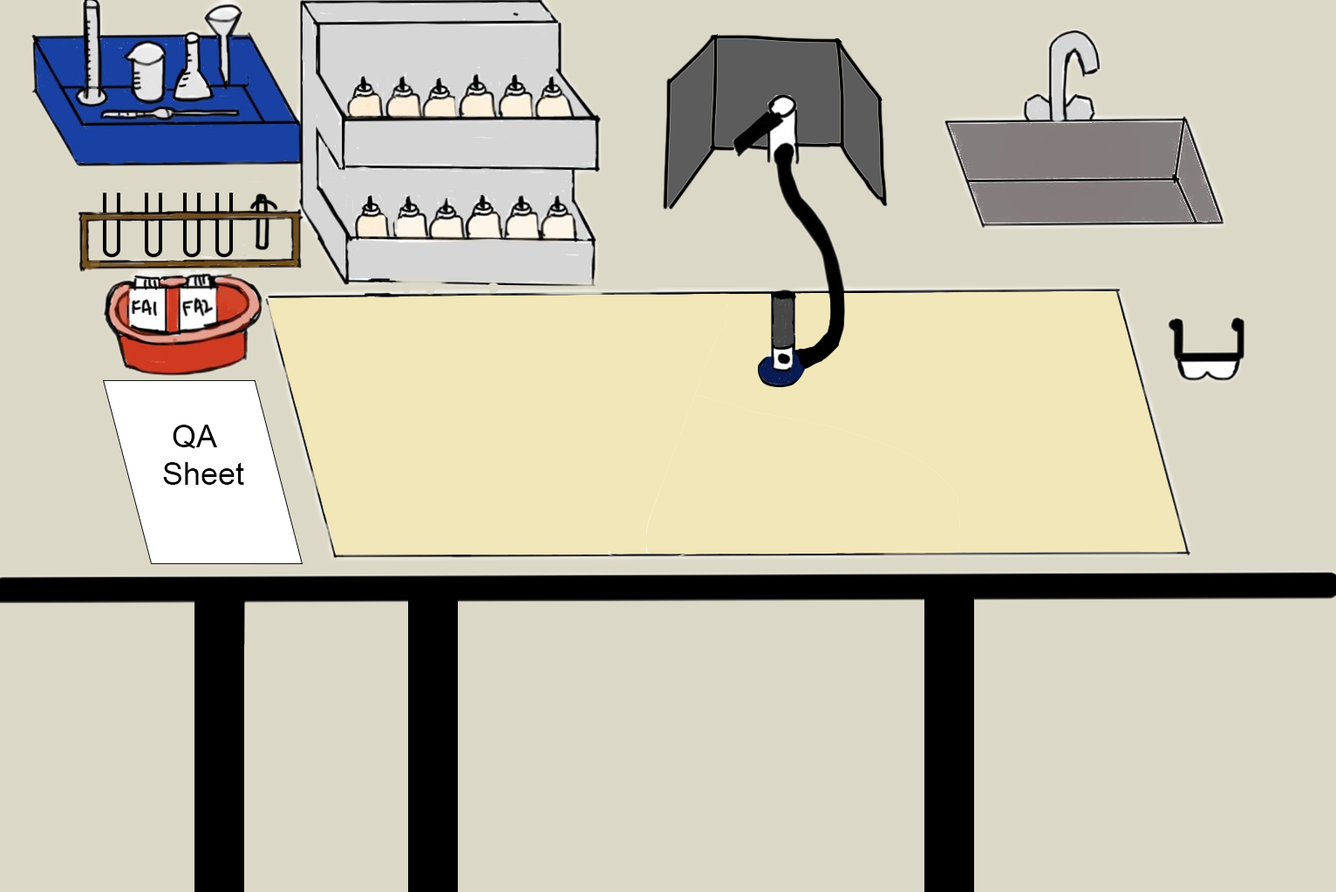
<style>
.page{position:relative;width:1336px;height:892px;background:#dcd8c7}
.page>*{position:absolute;margin:0}
.t1{font:31.4px "ArialMT";color:#000000}
.t2{font:41.9px "ArialMT";color:#000000}
</style>
<div class="page">
<p class="t1" style="left:163px;top:425px;width:81px;height:60px"><span class="t2"><br></span>QA Sheet</p>
</div>
